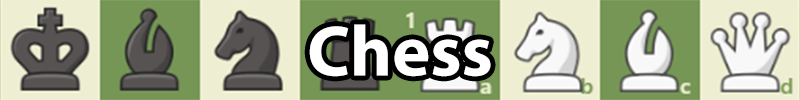
<style>
.page{position:relative;width:800px;height:100px;background:#eeeed2}
.page>*{position:absolute;margin:0}
.t1{font:72px "MyriadPro-Bold";color:#ffffff}
</style>
<div class="page">
<p class="t1" style="left:309px;top:24px;width:182px;height:53px">Chess</p>
</div>
